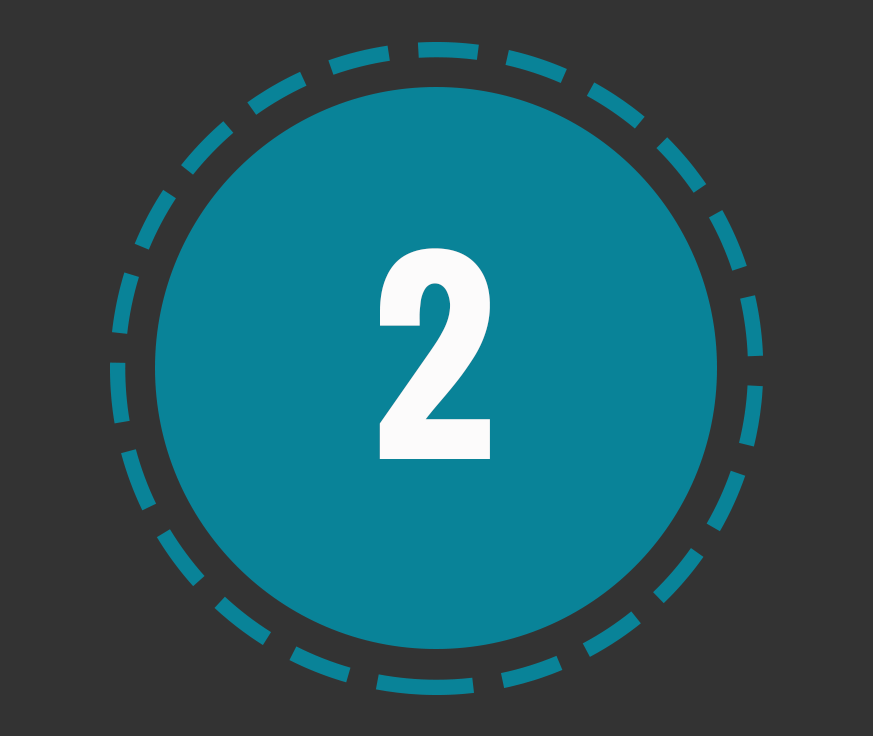
<style>
.page{position:relative;width:873px;height:736px;background:#333333}
.page>*{position:absolute;margin:0}
.t1{font:234.9px "Oswald-Bold";color:#fcfbfb}
</style>
<div class="page">
<p class="t1" style="left:379px;top:248px;width:111px;height:211px">2</p>
</div>
